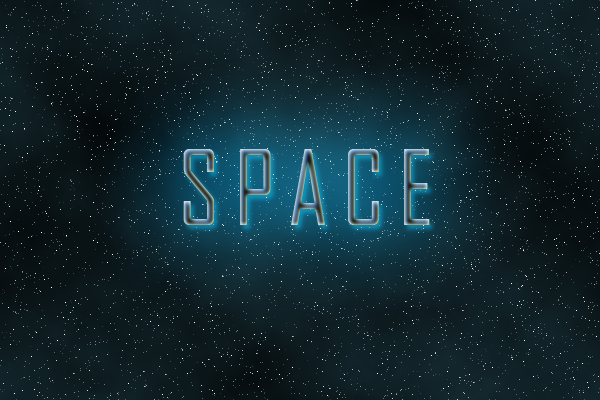
<style>
.page{position:relative;width:600px;height:400px}
.page>*{position:absolute;margin:0}
.t1{font:100px "AgencyFB-Reg";letter-spacing:-0.085em}
</style>
<div class="page">
<p class="t1" style="left:183px;top:149px;width:247px;height:76px">S  P  A  C  E</p>
</div>
